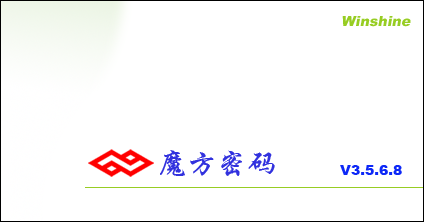
<style>
.page{position:relative;width:424px;height:222px;background:#ffffff}
.page>*{position:absolute;margin:0}
.t1{font:14px "Arial-Black";color:#97cd23;font-style:italic}
.t2{font:30px "STXingkai";color:#3131de}
.t3{font:14px "Arial-Black";color:#0d28f7}
</style>
<div class="page">
<p class="t1" style="left:342px;top:16px;width:69px;height:11px">Winshine</p>
<p class="t2" style="left:160px;top:150px;width:115px;height:26px">魔方密码</p>
<p class="t3" style="left:340px;top:165px;width:62px;height:10px">V3.5.6.8</p>
</div>
